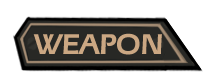
<style>
.page{position:relative;width:213px;height:77px;background:#ffffff}
.page>*{position:absolute;margin:0}
.t1{font:30px "037-CAI978";color:#cba783}
</style>
<div class="page">
<p class="t1" style="left:33px;top:33px;width:129px;height:22px">WEAPON</p>
</div>
